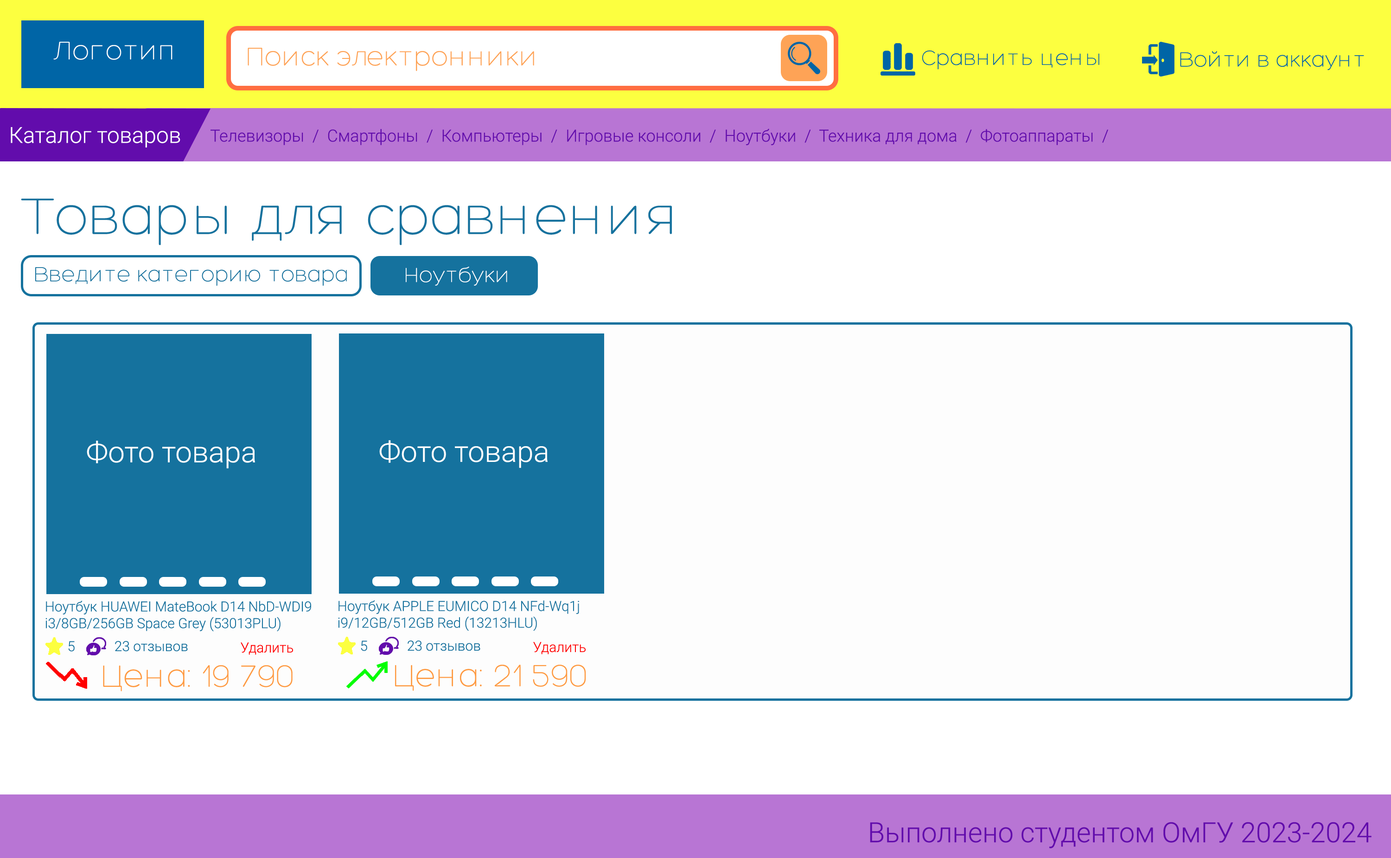
<style>
.page{position:relative;width:1391px;height:858px;background:#ffffff}
.page>*{position:absolute;margin:0}
.t1{font:27.8px "Hero-Light";color:#ffffff}
.t2{font:27.8px "Hero-Light";color:#fea356}
.t3{font:22.2px "Hero-Light";color:#0065a6}
.t4{font:22.2px "Roboto-Light";color:#ffffff}
.t5{font:16.7px "Roboto-Light";color:#620cac}
.t6{font:55.6px "Hero-Light";color:#15729e}
.t7{font:22.2px "Hero-Light";color:#15729e}
.t8{font:22.2px "Hero-Light";color:#ffffff}
.t9{font:29.2px "Roboto-Light";color:#ffffff}
.t10{font:13.9px "Roboto-Light";color:#15729e}
.t11{font:13.9px "Roboto-Light";color:#ff0000}
.t12{font:33.4px "Hero-Light";color:#fe9a40}
.t13{font:27.8px "Roboto-Light";color:#620cac}
</style>
<div class="page">
<p class="t1" style="left:53px;top:42px;width:119px;height:18px">Логотип</p>
<p class="t2" style="left:248px;top:48px;width:286px;height:23px">Поиск электронники</p>
<p class="t3" style="left:922px;top:50px;width:177px;height:20px">Сравнить цены</p>
<p class="t3" style="left:1180px;top:51px;width:184px;height:19px">Войти в аккаунт</p>
<p class="t4" style="left:11px;top:127px;width:169px;height:20px">Каталог товаров</p>
<p class="t5" style="left:210px;top:128px;width:898px;height:17px">Телевизоры  /  Смартфоны  /  Компьютеры  /  Игровые консоли  /  Ноутбуки  /  Техника для дома  /  Фотоаппараты  /</p>
<p class="t6" style="left:21px;top:198px;width:651px;height:47px">Товары для сравнения</p>
<p class="t7" style="left:35px;top:267px;width:312px;height:19px">Введите категорию товара</p>
<p class="t8" style="left:406px;top:267px;width:101px;height:19px">Ноутбуки</p>
<p class="t9" style="left:87px;top:440px;width:168px;height:28px">Фото товара</p>
<p class="t9" style="left:379px;top:440px;width:168px;height:28px">Фото товара</p>
<p class="t10" style="left:45px;top:600px;width:266px;height:31px">Ноутбук HUAWEI MateBook D14 NbD-WDI9 <br>i3/8GB/256GB Space Grey (53013PLU)</p>
<p class="t10" style="left:338px;top:600px;width:241px;height:31px">Ноутбук APPLE ЕUMICO D14 NFd-Wq1j <br>i9/12GB/512GB Red (13213HLU)</p>
<p class="t10" style="left:68px;top:641px;width:7px;height:10px">5</p>
<p class="t10" style="left:115px;top:641px;width:73px;height:10px">23 отзывов</p>
<p class="t11" style="left:241px;top:642px;width:52px;height:12px">Удалить</p>
<p class="t10" style="left:361px;top:640px;width:6px;height:11px">5</p>
<p class="t10" style="left:407px;top:640px;width:73px;height:11px">23 отзывов</p>
<p class="t11" style="left:533px;top:642px;width:52px;height:12px">Удалить</p>
<p class="t12" style="left:103px;top:665px;width:189px;height:26px">Цена: 19 790</p>
<p class="t12" style="left:395px;top:664px;width:191px;height:27px">Цена: 21 590</p>
<p class="t13" style="left:870px;top:821px;width:501px;height:27px">Выполнено студентом ОмГУ 2023-2024</p>
</div>
